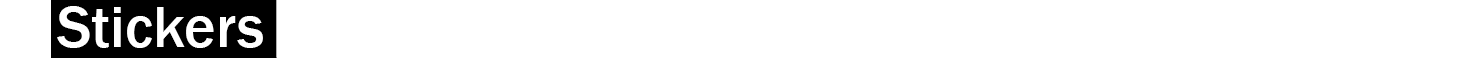
<style>
.page{position:relative;width:1477px;height:67px;background:#ffffff}
.page>*{position:absolute;margin:0}
.t1{font:60px "FranklinGothic-Medium";color:#ffffff}
</style>
<div class="page">
<p class="t1" style="left:57px;top:6px;width:206px;height:42px">Stickers</p>
</div>
